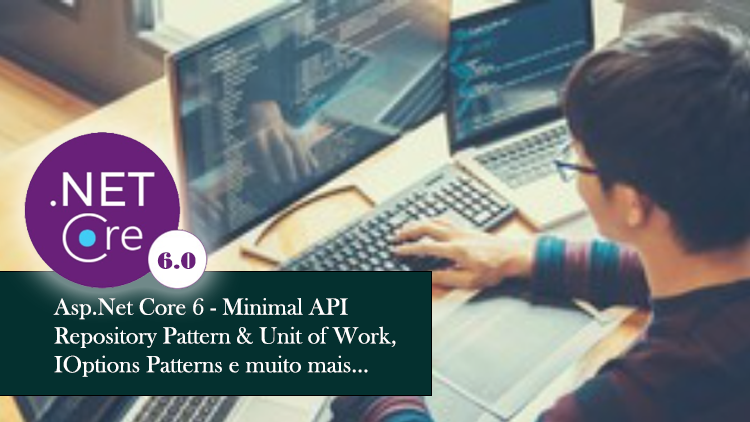
<style>
.page{position:relative;width:750px;height:422px}
.page>*{position:absolute;margin:0}
.t1{font:24px "BodoniMTBlack";color:#692079}
.t2{font:24px "BaskOldFace";color:#ffffff}
</style>
<div class="page">
<p class="t1" style="left:157px;top:252px;width:39px;height:17px">6.0</p>
<p class="t2" style="left:53px;top:298px;width:343px;height:79px">Asp.Net Core 6 - Minimal API<br>Repository Pattern &amp; Unit of Work,<br>IOptions Patterns e muito mais...</p>
</div>
